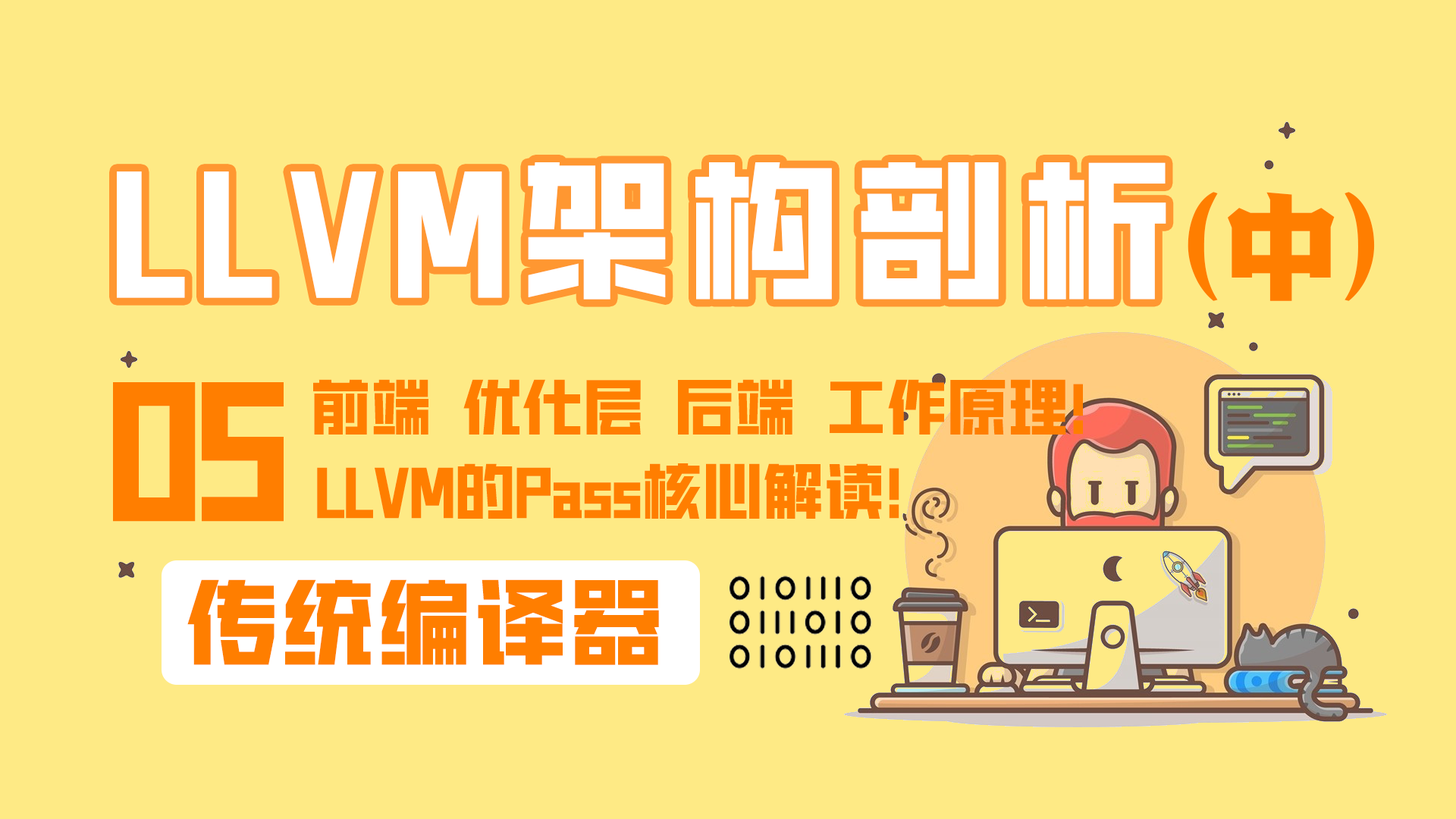
<style>
.page{position:relative;width:1456px;height:819px;background:#feea85}
.page>*{position:absolute;margin:0}
.t1{font:151.7px "HGGTZHVF-Medium";letter-spacing:0.1em;color:#ffffff}
.t2{font:121.3px "095-SSKunLunTi";color:#ff7e00}
.t3{font:166.8px "HGGTZHVF-Medium";letter-spacing:-0.01em;color:#ff7e00}
.t4{font:60.7px "HGGTZHVF-Medium";color:#ff7e00;font-weight:bold}
.t5{font:93.8px "HGGTZHVF-Medium";letter-spacing:0.025em;color:#ff7e00;font-weight:bold}
</style>
<div class="page">
<p class="t1" style="left:117px;top:162px;width:1049px;height:138px">LLVM架构剖析</p>
<p class="t2" style="left:1188px;top:192px;width:187px;height:109px">(中)</p>
<p class="t3" style="left:113px;top:382px;width:171px;height:140px">05</p>
<p class="t4" style="left:313px;top:379px;width:770px;height:56px">前端 优化层 后端 工作原理！</p>
<p class="t4" style="left:317px;top:463px;width:582px;height:56px">LLVM的Pass核心解读！</p>
<p class="t5" style="left:187px;top:579px;width:472px;height:86px">传统编译器</p>
</div>
